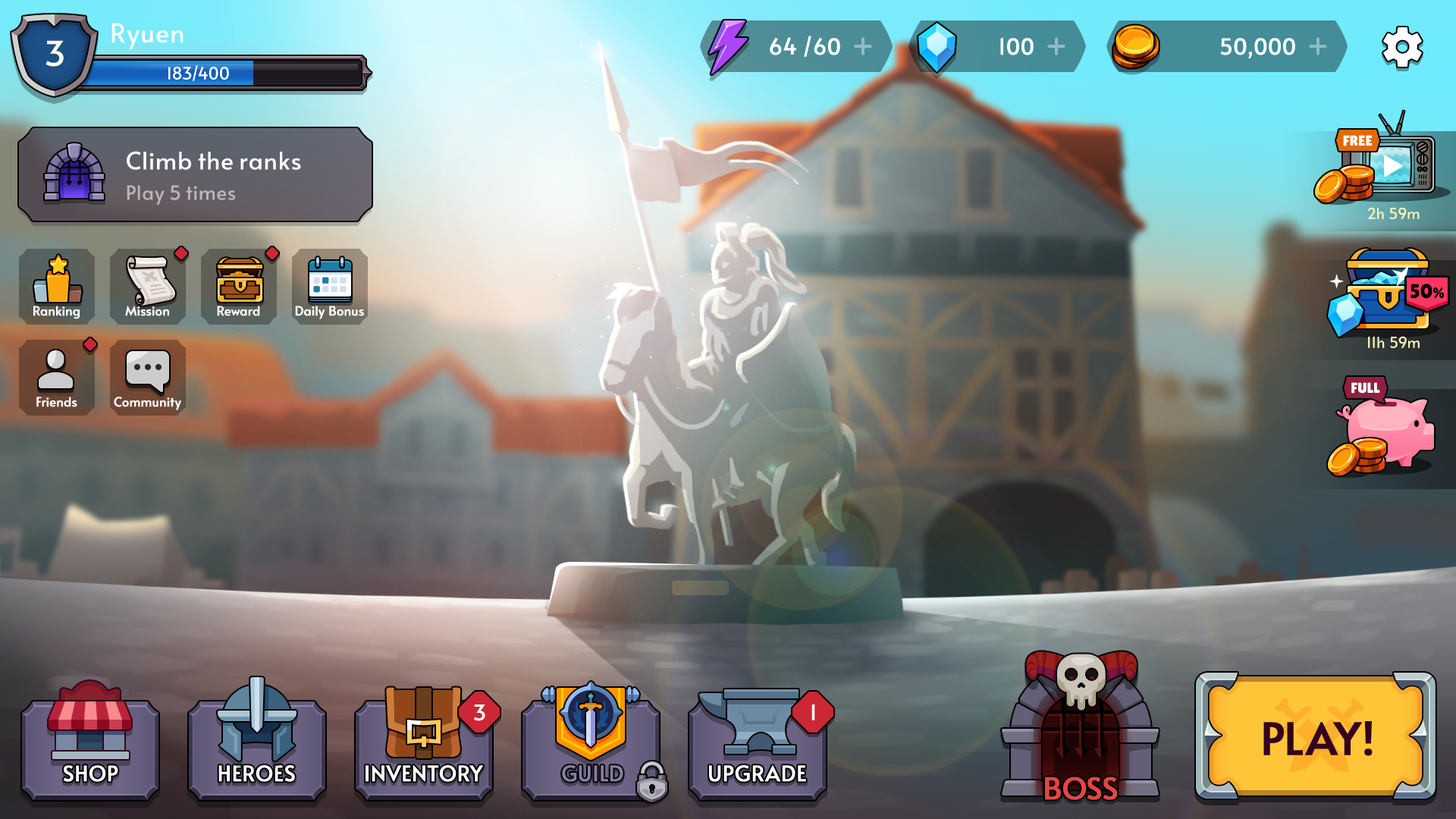
<style>
.page{position:relative;width:1456px;height:819px}
.page>*{position:absolute;margin:0}
.t1{font:26px "Alata-Regular";color:#ffffff}
.t2{font:34.5px "Alata-Regular";color:#fbfde7}
.t3{font:21.9px "Alata-Regular";letter-spacing:-0.025em;color:#ffffff;font-weight:bold}
.t4{font:16.7px "Alata-Regular";color:#ffffff}
.t5{font:14.4px "LilitaOne";color:#ffffff;text-transform:uppercase}
.t6{font:24.3px "Alata-Regular";letter-spacing:-0.01em;color:#ffffff}
.t7{font:19.7px "Alata-Regular";letter-spacing:-0.01em;color:#beb5b6}
.t8{font:15.2px "Alata-Regular";color:#fbf4bd}
.t9{font:20px "LilitaOne";color:#000000}
.t10{font:15px "LilitaOne";color:#000000}
.t11{font:12.9px "Alata-Regular";color:#ffffff;font-weight:bold}
.t12{font:21.2px "Alata-Regular";color:#ffffff}
.t13{font:44px "Alata-Regular";color:#34011e;text-transform:uppercase;font-weight:bold}
.t14{font:21.2px "Alata-Regular";color:#ffffff;text-transform:uppercase;font-weight:bold}
.t15{font:21.2px "Alata-Regular";color:#887da3;text-transform:uppercase;font-weight:bold}
.t16{font:30.3px "Alata-Regular";color:#e24545;text-transform:uppercase;font-weight:bold}
</style>
<div class="page">
<p class="t1" style="left:111px;top:23px;width:73px;height:26px">Ryuen</p>
<p class="t2" style="left:45px;top:40px;width:19px;height:27px">3</p>
<p class="t3" style="left:770px;top:36px;width:70px;height:21px">64 /60</p>
<p class="t3" style="left:1000px;top:37px;width:34px;height:18px">100</p>
<p class="t3" style="left:1220px;top:38px;width:75px;height:20px">50,000</p>
<p class="t4" style="left:168px;top:65px;width:61px;height:16px">183/400</p>
<p class="t5" style="left:1343px;top:135px;width:30px;height:11px">Free</p>
<p class="t6" style="left:127px;top:151px;width:174px;height:19px">Climb the ranks</p>
<p class="t7" style="left:127px;top:185px;width:109px;height:20px">Play 5 times</p>
<p class="t8" style="left:1367px;top:207px;width:53px;height:12px">2h 59m</p>
<p class="t9" style="left:1410px;top:284px;width:34px;height:15px">50<span class="t10">%</span></p>
<p class="t11" style="left:33px;top:306px;width:47px;height:13px">Ranking</p>
<p class="t11" style="left:125px;top:306px;width:44px;height:10px">Mission</p>
<p class="t11" style="left:217px;top:306px;width:43px;height:10px">Reward</p>
<p class="t11" style="left:295px;top:306px;width:69px;height:13px">Daily Bonus</p>
<p class="t8" style="left:1368px;top:336px;width:52px;height:12px">11h 59m</p>
<p class="t5" style="left:1351px;top:382px;width:29px;height:12px">Full</p>
<p class="t11" style="left:36px;top:397px;width:41px;height:10px">Friends</p>
<p class="t11" style="left:114px;top:397px;width:67px;height:13px">Community</p>
<p class="t12" style="left:474px;top:704px;width:11px;height:17px">3</p>
<p class="t12" style="left:811px;top:704px;width:4px;height:16px">1</p>
<p class="t13" style="left:1263px;top:721px;width:110px;height:35px">Play!</p>
<p class="t14" style="left:63px;top:765px;width:55px;height:17px">Shop</p>
<p class="t14" style="left:218px;top:765px;width:77px;height:17px">Heroes</p>
<p class="t14" style="left:366px;top:765px;width:118px;height:17px">Inventory</p>
<p class="t15" style="left:562px;top:765px;width:61px;height:17px">Guild</p>
<p class="t14" style="left:709px;top:765px;width:97px;height:17px">Upgrade</p>
<p class="t16" style="left:1045px;top:777px;width:73px;height:23px">Boss</p>
</div>
